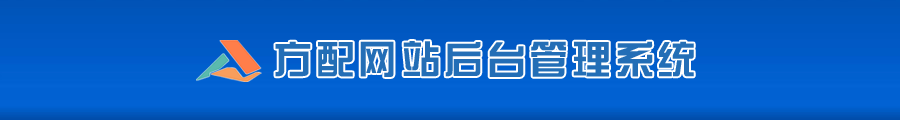
<style>
.page{position:relative;width:900px;height:120px}
.page>*{position:absolute;margin:0}
.t1{font:38.8px "FZZYJW--GB1-0";letter-spacing:0.1em;color:#236eb6}
</style>
<div class="page">
<p class="t1" style="left:275px;top:41px;width:419px;height:36px">方配网站后台管理系统</p>
</div>
